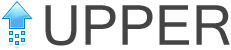
<style>
.page{position:relative;width:231px;height:50px;background:#ffffff}
.page>*{position:absolute;margin:0}
.t1{font:60px "Shruti";color:#444444;text-transform:uppercase}
</style>
<div class="page">
<p class="t1" style="left:45px;top:5px;width:185px;height:41px">upper</p>
</div>
